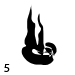
<style>
.page{position:relative;width:75px;height:75px;background:#ffffff}
.page>*{position:absolute;margin:0}
.t1{font:12px "MyriadPro-Regular";color:#000000}
</style>
<div class="page">
<p class="t1" style="left:4px;top:64px;width:6px;height:8px">5</p>
</div>
